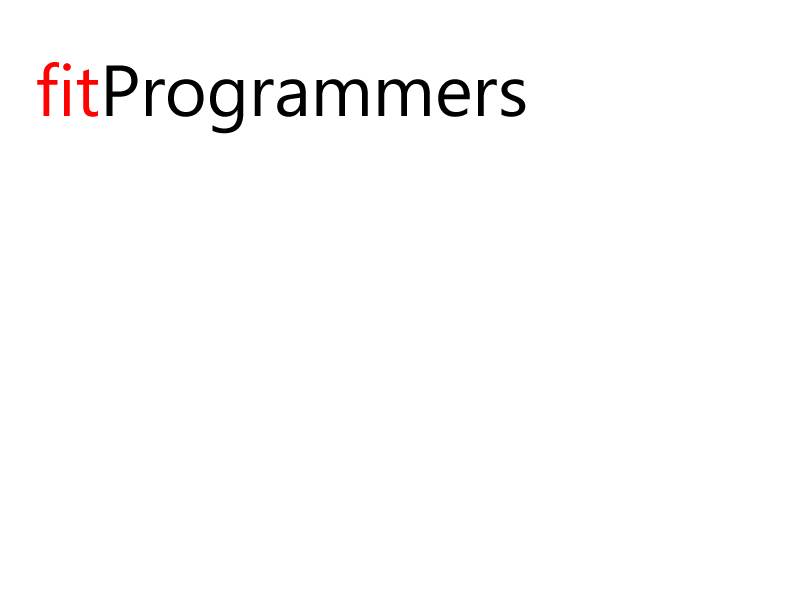
<style>
.page{position:relative;width:800px;height:600px;background:#ffffff}
.page>*{position:absolute;margin:0}
.t1{font:72px "NirmalaUI";color:#000000}
.t2{font:72px "NirmalaUI";color:#ff0101}
</style>
<div class="page">
<p class="t1" style="left:37px;top:62px;width:489px;height:72px"><span class="t2">fit</span>Programmers</p>
</div>
